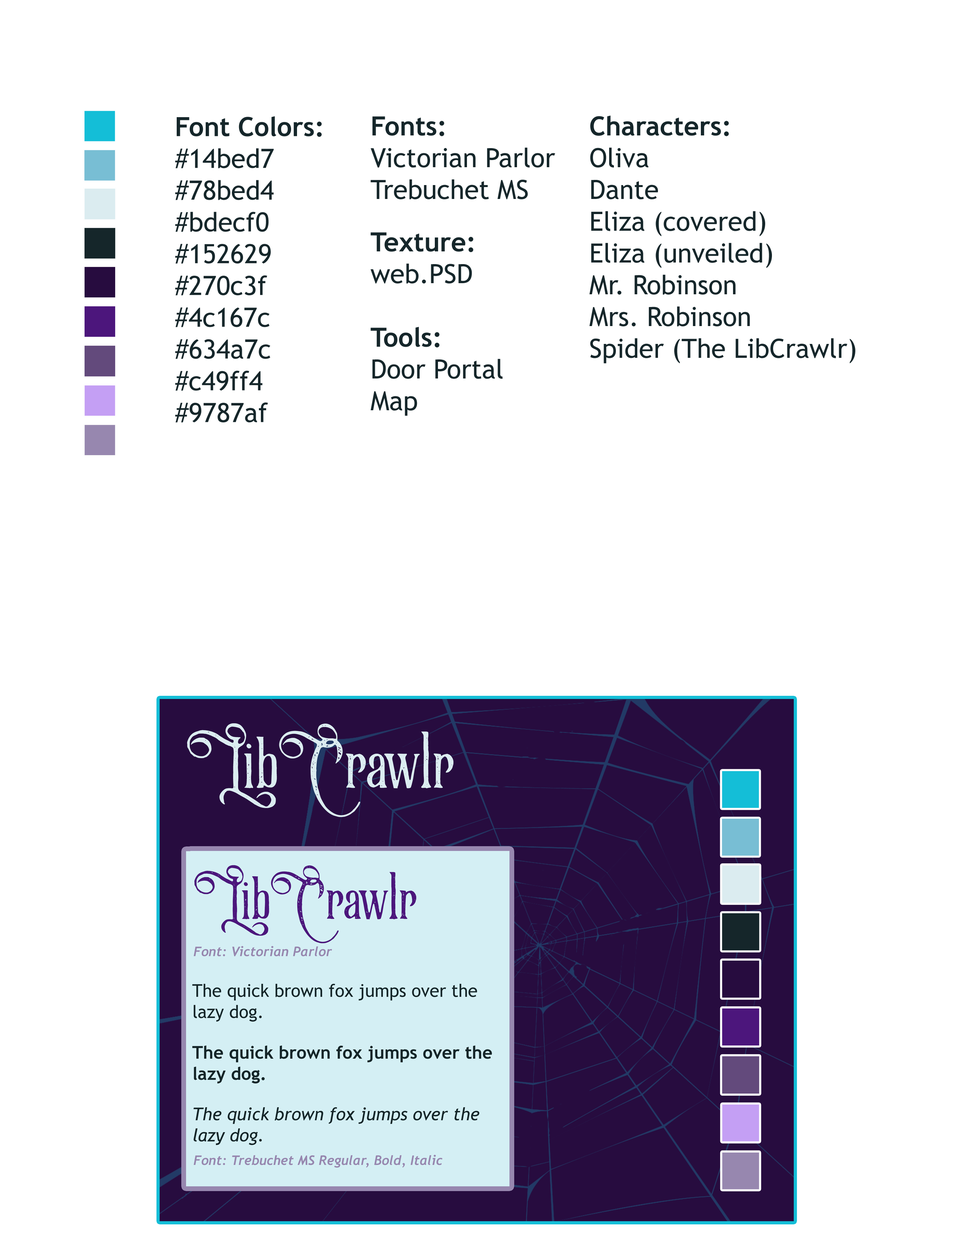
<style>
.page{position:relative;width:953px;height:1251px;background:#ffffff}
.page>*{position:absolute;margin:0}
.t1{font:26.5px "TrebuchetMS";color:#15262a}
.t2{font:26.5px "TrebuchetMS-Bold";color:#15262a}
</style>
<div class="page">
<p class="t1" style="left:175px;top:116px;width:147px;height:307px"><span class="t2">Font Colors:<br></span>#14bed7<br>#78bed4<br>#bdecf0<br>#152629<br>#270c3f<br>#4c167c<br>#634a7c<br>#c49ff4<br>#9787af</p>
<p class="t1" style="left:371px;top:116px;width:184px;height:83px"><span class="t2">Fonts:<br></span>Victorian Parlor<br>Trebuchet MS</p>
<p class="t1" style="left:589px;top:116px;width:266px;height:247px"><span class="t2">Characters:<br></span>Oliva<br>Dante<br>Eliza (covered)<br>Eliza (unveiled)<br>Mr. Robinson<br>Mrs. Robinson<br>Spider (The LibCrawlr)</p>
<p class="t2" style="left:371px;top:232px;width:102px;height:52px">Texture:<br><span class="t1">web.PSD</span></p>
<p class="t1" style="left:371px;top:327px;width:132px;height:89px"><span class="t2">Tools:</span><br>Door Portal<br>Map</p>
</div>
